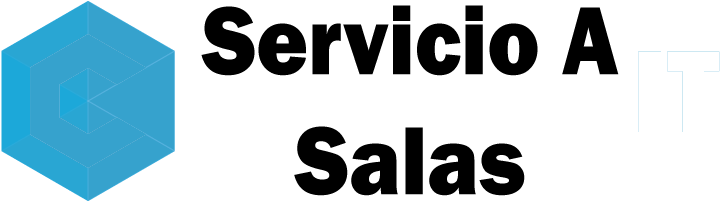
<style>
.page{position:relative;width:720px;height:202px;background:#ffffff}
.page>*{position:absolute;margin:0}
.t1{font:100px "FranklinGothic-Heavy";color:#000000;scale:0.89 1}
</style>
<div class="page">
<p class="t1" style="left:201px;top:5px;width:418px;height:191px;text-align:center">Servicio A<br>Salas</p>
</div>
